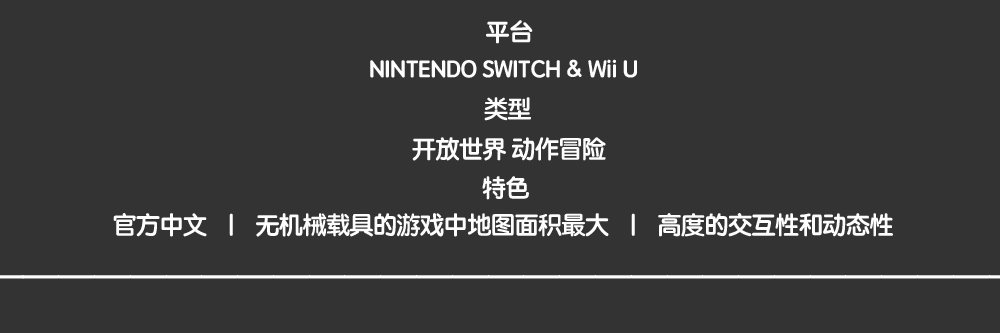
<style>
.page{position:relative;width:1000px;height:333px;background:#333333}
.page>*{position:absolute;margin:0}
.t1{font:24px "STYuanti-SC-Bold";letter-spacing:-0.02em;color:#fefdfd}
</style>
<div class="page">
<p class="t1" style="left:486px;top:20px;width:47px;height:24px">平台</p>
<p class="t1" style="left:370px;top:59px;width:267px;height:19px">NINTENDO SWITCH &amp; Wii U</p>
<p class="t1" style="left:484px;top:97px;width:47px;height:24px">类型</p>
<p class="t1" style="left:412px;top:137px;width:194px;height:24px">开放世界 动作冒险</p>
<p class="t1" style="left:482px;top:176px;width:47px;height:24px">特色</p>
<p class="t1" style="left:113px;top:213px;width:780px;height:24px">官方中文    |    无机械载具的游戏中地图面积最大    |    高度的交互性和动态性</p>
</div>
